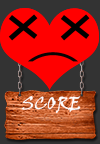
<style>
.page{position:relative;width:100px;height:144px;background:#ff0000}
.page>*{position:absolute;margin:0}
.t1{font:18px "VinerHandITC";color:#ffffff}
</style>
<div class="page">
<p class="t1" style="left:22px;top:96px;width:59px;height:18px">SCORE</p>
</div>
